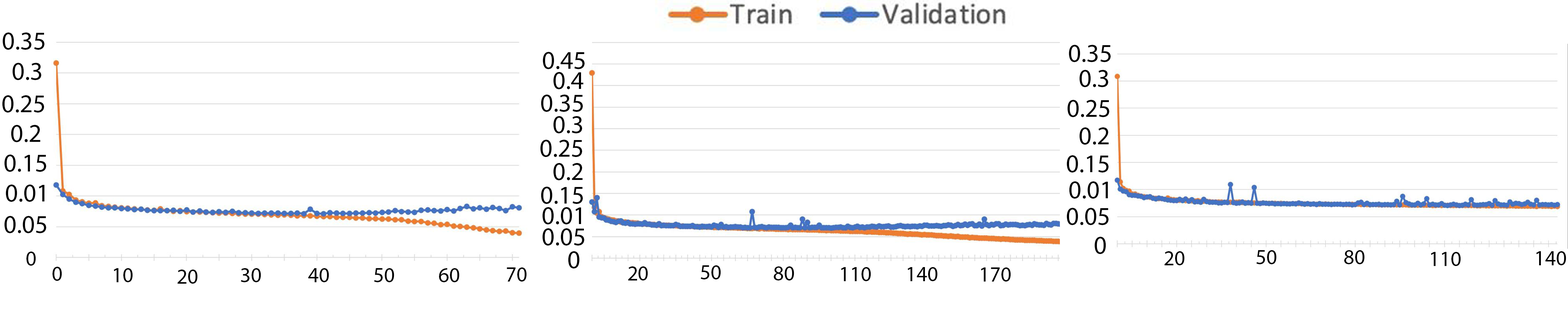
<style>
.page{position:relative;width:1568px;height:314px;background:#ffffff}
.page>*{position:absolute;margin:0}
.t1{font:25.4px "MyriadPro-Regular";color:#000000}
.t2{font:21.1px "MyriadPro-Regular";color:#000000}
</style>
<div class="page">
<p class="t1" style="left:2px;top:32px;width:42px;height:18px">0.35</p>
<p class="t1" style="left:543px;top:52px;width:42px;height:17px">0.45</p>
<p class="t1" style="left:1069px;top:45px;width:42px;height:17px">0.35</p>
<p class="t1" style="left:12px;top:63px;width:29px;height:17px">0.3</p>
<p class="t1" style="left:553px;top:72px;width:31px;height:17px">0.4</p>
<p class="t1" style="left:1079px;top:70px;width:29px;height:17px">0.3</p>
<p class="t1" style="left:2px;top:95px;width:42px;height:17px">0.25</p>
<p class="t1" style="left:541px;top:94px;width:42px;height:18px">0.35</p>
<p class="t1" style="left:1067px;top:100px;width:42px;height:17px">0.25</p>
<p class="t1" style="left:11px;top:125px;width:30px;height:17px">0.2</p>
<p class="t1" style="left:553px;top:116px;width:29px;height:17px">0.3</p>
<p class="t1" style="left:1079px;top:127px;width:30px;height:17px">0.2</p>
<p class="t1" style="left:540px;top:140px;width:42px;height:17px">0.25</p>
<p class="t1" style="left:4px;top:154px;width:42px;height:18px">0.15<br>.0</p>
<p class="t1" style="left:1067px;top:155px;width:42px;height:17px">0.15<br>.0</p>
<p class="t1" style="left:553px;top:163px;width:30px;height:17px">0.2</p>
<p class="t1" style="left:6px;top:184px;width:38px;height:18px">0.01<br>.04</p>
<p class="t1" style="left:1069px;top:181px;width:39px;height:17px">0.01<br>.04</p>
<p class="t1" style="left:541px;top:186px;width:42px;height:18px">0.15<br>.0</p>
<p class="t1" style="left:542px;top:207px;width:39px;height:17px">0.01<br>.04</p>
<p class="t1" style="left:1067px;top:208px;width:42px;height:17px">0.05<br>.0</p>
<p class="t1" style="left:4px;top:216px;width:42px;height:17px">0.05<br>.0</p>
<p class="t1" style="left:542px;top:228px;width:42px;height:17px">0.05<br>.0</p>
<p class="t1" style="left:1094px;top:236px;width:12px;height:18px">0</p>
<p class="t2" style="left:26px;top:251px;width:10px;height:14px">0</p>
<p class="t1" style="left:568px;top:251px;width:12px;height:17px">0</p>
<p class="t2" style="left:1165px;top:251px;width:20px;height:14px">20</p>
<p class="t2" style="left:1256px;top:250px;width:21px;height:14px">50</p>
<p class="t2" style="left:1344px;top:250px;width:21px;height:14px">80</p>
<p class="t2" style="left:1431px;top:252px;width:30px;height:14px">110</p>
<p class="t2" style="left:1536px;top:251px;width:30px;height:14px">140</p>
<p class="t2" style="left:53px;top:266px;width:9px;height:14px">0</p>
<p class="t2" style="left:114px;top:268px;width:19px;height:14px">10</p>
<p class="t2" style="left:178px;top:269px;width:20px;height:14px">20</p>
<p class="t2" style="left:241px;top:268px;width:20px;height:14px">30</p>
<p class="t2" style="left:308px;top:268px;width:21px;height:14px">40</p>
<p class="t2" style="left:374px;top:268px;width:20px;height:14px">50</p>
<p class="t2" style="left:439px;top:268px;width:20px;height:14px">60</p>
<p class="t2" style="left:507px;top:267px;width:20px;height:14px">70</p>
<p class="t2" style="left:628px;top:266px;width:20px;height:14px">20</p>
<p class="t2" style="left:700px;top:265px;width:21px;height:14px">50</p>
<p class="t2" style="left:774px;top:266px;width:20px;height:14px">80</p>
<p class="t2" style="left:841px;top:267px;width:30px;height:14px">110</p>
<p class="t2" style="left:908px;top:267px;width:30px;height:14px">140</p>
<p class="t2" style="left:981px;top:267px;width:30px;height:14px">170</p>
</div>
